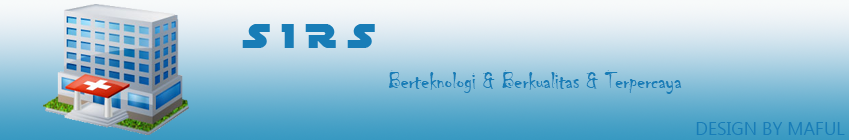
<style>
.page{position:relative;width:849px;height:140px}
.page>*{position:absolute;margin:0}
.t1{font:24px "Chiller-Regular";color:#187db7}
.t2{font:18px "Ebrima";color:#187db7}
</style>
<div class="page">
<p class="t1" style="left:388px;top:70px;width:294px;height:24px">Berteknologi &amp; Berkualitas &amp; Terpercaya</p>
<p class="t2" style="left:696px;top:122px;width:149px;height:13px">DESIGN BY MAFUL</p>
</div>
